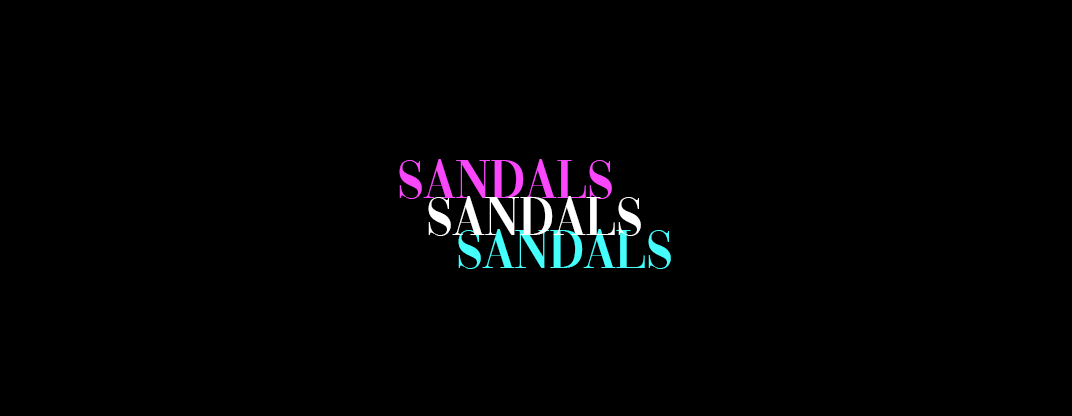
<style>
.page{position:relative;width:1072px;height:416px;background:#000000}
.page>*{position:absolute;margin:0}
.t1{font:57px "Vogue-Regular";color:#f948fb}
.t2{font:57px "Vogue-Regular";color:#ffffff}
.t3{font:57px "Vogue-Regular";color:#44fffc}
</style>
<div class="page">
<p class="t1" style="left:399px;top:159px;width:213px;height:40px">SANDALS</p>
<p class="t2" style="left:428px;top:196px;width:213px;height:40px">SANDALS</p>
<p class="t3" style="left:458px;top:229px;width:213px;height:40px">SANDALS</p>
</div>
